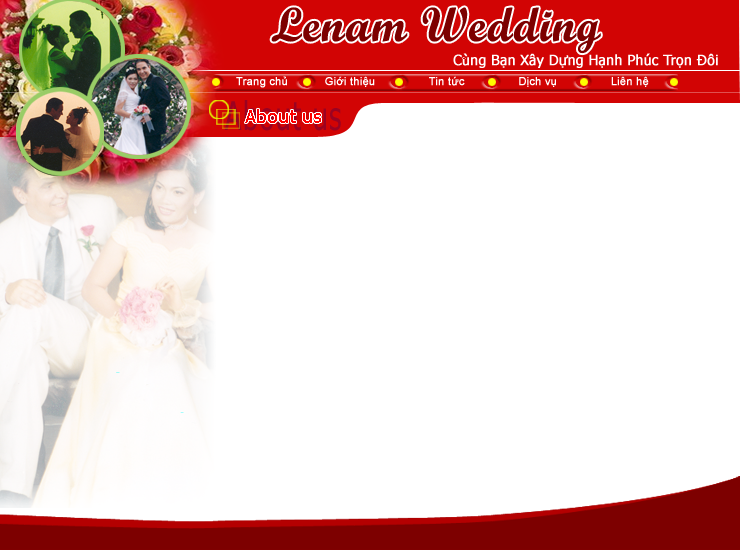
<style>
.page{position:relative;width:740px;height:550px;background:#ffffff}
.page>*{position:absolute;margin:0}
.t1{font:48px "ScriptMTBold";color:#7d0000;font-weight:bold}
.t2{font:14px "Tahoma";color:#ffffff;font-weight:bold}
.t3{font:11px "ArialMT";color:#ffffff;font-weight:bold}
.t4{font:39.4px "Tahoma";letter-spacing:0.05em;color:#9b0221;scale:0.69 1}
.t5{font:18px "Tahoma";letter-spacing:0.05em;color:#ff0000}
</style>
<div class="page">
<p class="t1" style="left:271px;top:7px;width:330px;height:47px">Lenam Wedding</p>
<p class="t2" style="left:453px;top:53px;width:265px;height:15px">Cùng Bạn Xây Dựng Hạnh Phúc Trọn Đôi</p>
<p class="t3" style="left:236px;top:76px;width:413px;height:12px">Trang chủ           Giới thiệu                Tin tức                Dịch vụ                Liên hệ</p>
<p class="t4" style="left:224px;top:100px;width:117px;height:31px">About us</p>
<p class="t5" style="left:245px;top:109px;width:76px;height:14px">About us</p>
</div>
